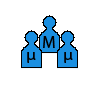
<style>
.page{position:relative;width:100px;height:100px;background:#ffffff}
.page>*{position:absolute;margin:0}
.t1{font:16.7px "MyriadPro-Regular";color:#000000}
</style>
<div class="page">
<p class="t1" style="left:43px;top:36px;width:12px;height:12px">M</p>
<p class="t1" style="left:27px;top:52px;width:9px;height:11px">μ</p>
<p class="t1" style="left:64px;top:52px;width:9px;height:11px">μ</p>
</div>
